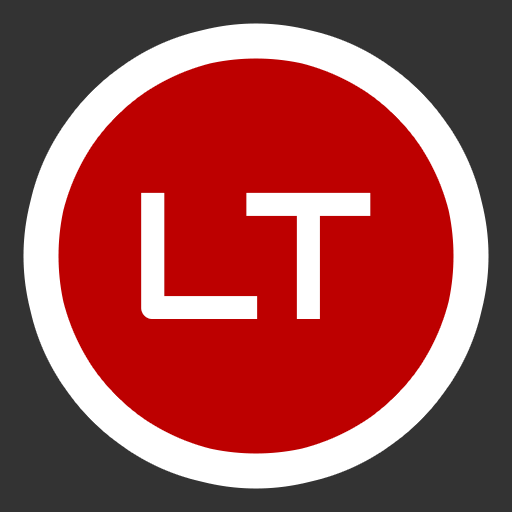
<style>
.page{position:relative;width:512px;height:512px;background:#bd0000}
.page>*{position:absolute;margin:0}
.t1{font:180px "Audiowide-Regular";color:#ffffff}
</style>
<div class="page">
<p class="t1" style="left:141px;top:192px;width:230px;height:127px">LT</p>
</div>
